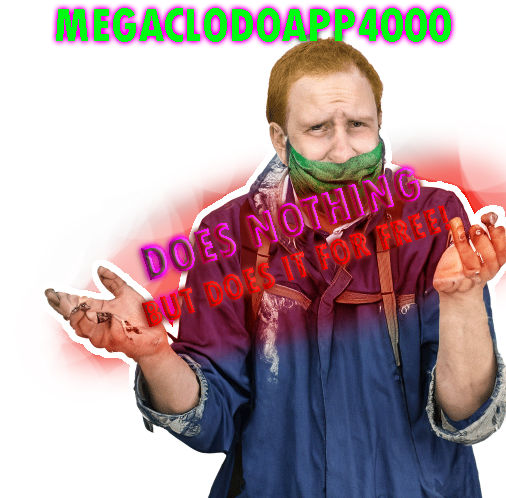
<style>
.page{position:relative;width:506px;height:498px;background:#ffffff}
.page>*{position:absolute;margin:0}
.t1{font:48.7px "TwCenMT-CondensedExtraBold";color:#00fb12}
.t2{font:37.5px "TwCenMT-CondensedExtraBold"}
</style>
<div class="page">
<p class="t1" style="left:56px;top:8px;width:395px;height:34px">MEGACLODOAPP4000</p>
<p class="t2" style="left:142px;top:205px;width:309px;height:122px;rotate:-18deg">BUT DOES IT FOR FREE!</p>
</div>
